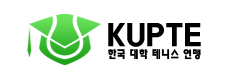
<style>
.page{position:relative;width:236px;height:77px;background:#ffffff}
.page>*{position:absolute;margin:0}
.t1{font:32.9px "HaanYHeadB";color:#000000}
.t2{font:10.9px "HaanYHeadB";color:#010101}
</style>
<div class="page">
<p class="t1" style="left:108px;top:23px;width:93px;height:24px">KUPTE</p>
<p class="t2" style="left:108px;top:49px;width:93px;height:11px">한국 대학 테니스 연맹</p>
</div>
